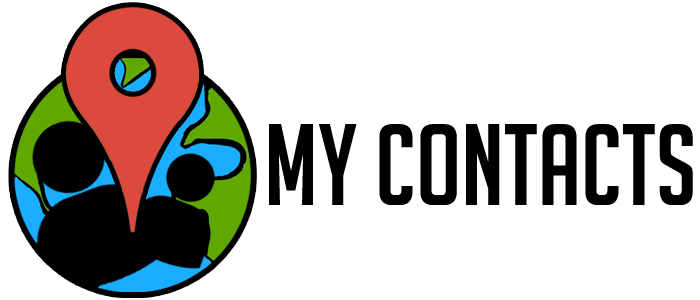
<style>
.page{position:relative;width:700px;height:300px;background:#ffffff}
.page>*{position:absolute;margin:0}
.t1{font:112.5px "BigNoodleTitling";color:#000000}
</style>
<div class="page">
<p class="t1" style="left:269px;top:124px;width:424px;height:81px">MY CONTACTS</p>
</div>
